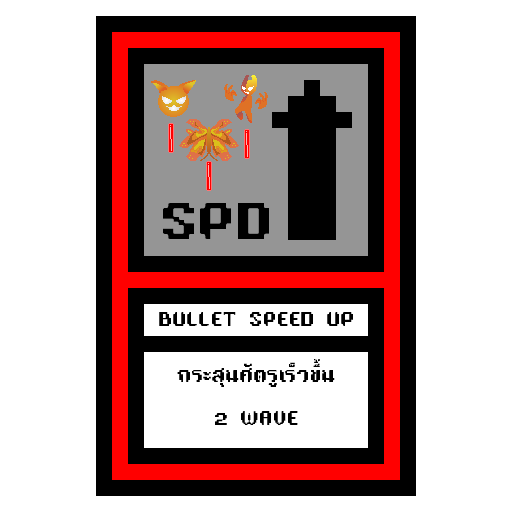
<style>
.page{position:relative;width:512px;height:512px;background:#ffffff}
.page>*{position:absolute;margin:0}
.t1{font:48px "TA16BIT-Regular";color:#000000}
.t2{font:18px "TA16BIT-Regular";color:#000000}
</style>
<div class="page">
<p class="t1" style="left:163px;top:203px;width:106px;height:36px">SPD</p>
<p class="t2" style="left:159px;top:312px;width:194px;height:14px">BULLET SPEED UP</p>
<p class="t2" style="left:177px;top:359px;width:158px;height:66px;text-align:center">กระสุนศัตรูเร็วขึ้น<br><br>2 WAVE</p>
</div>
